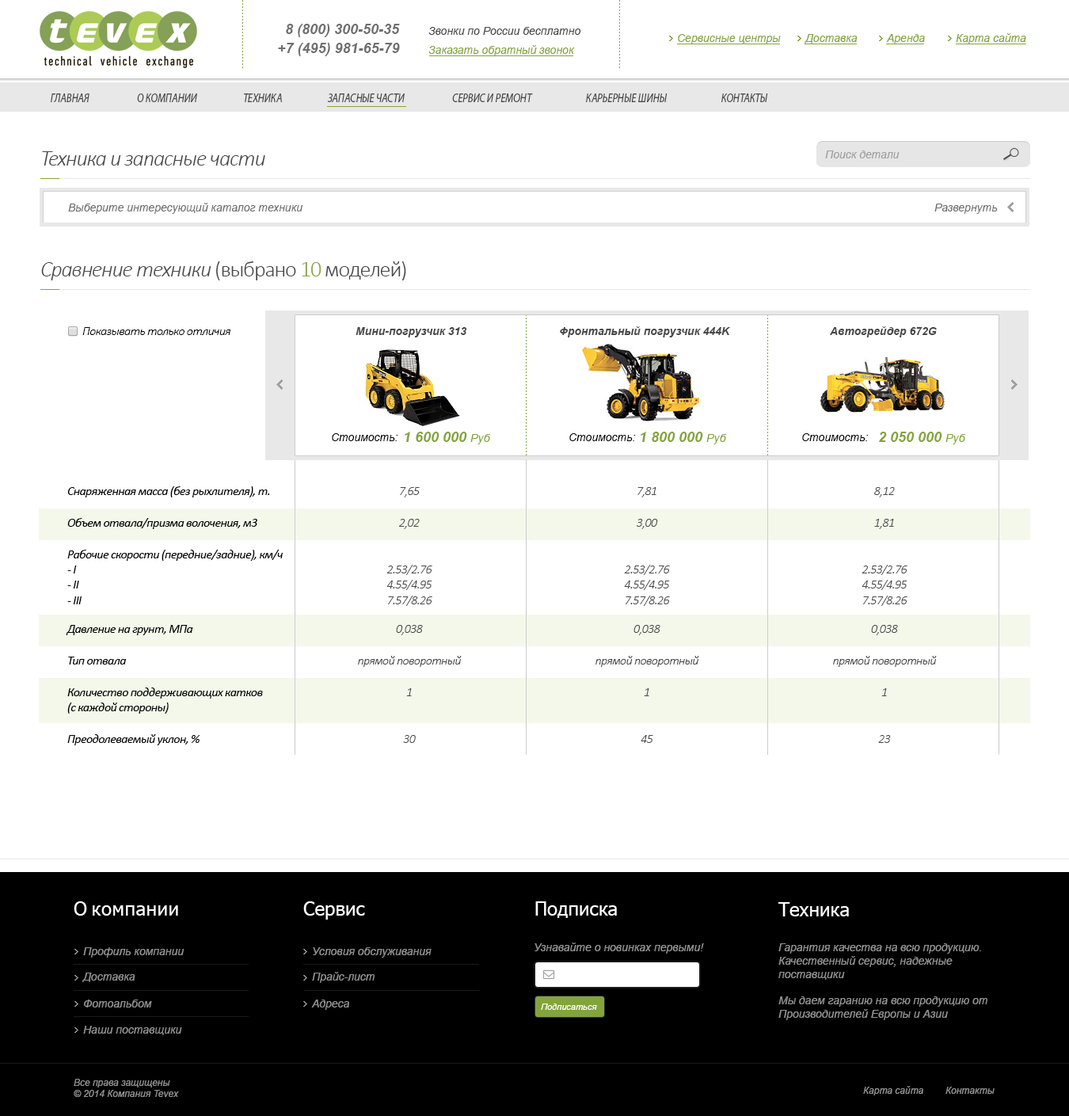
<style>
.page{position:relative;width:1069px;height:1116px;background:#ffffff}
.page>*{position:absolute;margin:0}
.t1{font:14.3px "Arial-BoldItalicMT";color:#6f6f6f}
.t2{font:11.1px "Arial-ItalicMT";color:#484848}
.t3{font:11.1px "Arial-ItalicMT";color:#83a43c}
.t4{font:12.9px "MyriadPro-It";color:#484848;scale:0.79 1}
.t5{font:22.2px "Calibri-LightItalic";letter-spacing:-0.04em;color:#484848}
.t6{font:11.1px "Arial-ItalicMT";color:#a0a0a0}
.t7{font:11.1px "Arial-ItalicMT";color:#6f6f6f}
.t8{font:22.2px "Calibri-Light";letter-spacing:-0.04em;color:#484848}
.t9{font:22.2px "Calibri-Light";letter-spacing:-0.04em;color:#83a43c}
.t10{font:12.7px "Calibri-LightItalic";letter-spacing:-0.04em;color:#000000}
.t11{font:12.7px "Calibri-Italic";letter-spacing:-0.04em;color:#000000}
.t12{font:12.7px "Calibri-LightItalic";letter-spacing:-0.04em;color:#484848}
.t13{font:19px "Tahoma";letter-spacing:0.02em;color:#ffffff}
.t14{font:19px "Tahoma";color:#ffffff}
.t15{font:11.1px "Arial-ItalicMT";color:#939393}
.t16{font:8.7px "Arial-ItalicMT";color:#ffffff}
.t17{font:9.5px "Arial-ItalicMT";color:#939393}
</style>
<div class="page">
<p class="t1" style="left:286px;top:24px;width:114px;height:13px">8 (800) 300-50-35</p>
<p class="t2" style="left:428px;top:27px;width:153px;height:8px">Звонки по России бесплатно</p>
<p class="t3" style="left:678px;top:34px;width:103px;height:10px">Сервисные центры</p>
<p class="t3" style="left:804px;top:34px;width:53px;height:10px">Доставка</p>
<p class="t3" style="left:886px;top:34px;width:39px;height:10px">Аренда</p>
<p class="t3" style="left:956px;top:33px;width:70px;height:11px">Карта сайта</p>
<p class="t1" style="left:278px;top:43px;width:122px;height:13px">+7 (495) 981-65-79</p>
<p class="t3" style="left:428px;top:45px;width:147px;height:11px">Заказать обратный звонок</p>
<p class="t4" style="left:51px;top:93px;width:38px;height:9px">ГЛАВНАЯ</p>
<p class="t4" style="left:137px;top:93px;width:60px;height:9px">О КОМПАНИИ</p>
<p class="t4" style="left:244px;top:93px;width:38px;height:9px">ТЕХНИКА</p>
<p class="t4" style="left:327px;top:93px;width:78px;height:9px">ЗАПАСНЫЕ ЧАСТИ</p>
<p class="t4" style="left:452px;top:93px;width:81px;height:9px">СЕРВИС И РЕМОНТ</p>
<p class="t4" style="left:586px;top:93px;width:81px;height:9px">КАРЬЕРНЫЕ ШИНЫ</p>
<p class="t4" style="left:721px;top:93px;width:47px;height:9px">КОНТАКТЫ</p>
<p class="t5" style="left:42px;top:151px;width:223px;height:14px">Техника и запасные части</p>
<p class="t6" style="left:825px;top:150px;width:74px;height:8px">Поиск детали</p>
<p class="t7" style="left:68px;top:203px;width:235px;height:11px">Выберите интересующий каталог техники</p>
<p class="t7" style="left:934px;top:203px;width:64px;height:11px">Развернуть</p>
<p class="t5" style="left:41px;top:261px;width:365px;height:19px">Сравнение техники <span class="t8">(выбрано </span><span class="t9">10 </span><span class="t8">моделей)</span></p>
<p class="t10" style="left:82px;top:327px;width:148px;height:8px">Показывать только отличия</p>
<p class="t11" style="left:67px;top:486px;width:203px;height:11px">Снаряженная масса (без рыхлителя), т.</p>
<p class="t12" style="left:400px;top:487px;width:20px;height:10px">7,65</p>
<p class="t12" style="left:637px;top:487px;width:19px;height:10px">7,81</p>
<p class="t12" style="left:874px;top:487px;width:21px;height:10px">8,12</p>
<p class="t11" style="left:67px;top:518px;width:190px;height:11px">Объем отвала/призма волочения, м3</p>
<p class="t12" style="left:399px;top:519px;width:21px;height:10px">2,02</p>
<p class="t12" style="left:637px;top:519px;width:21px;height:10px">3,00</p>
<p class="t12" style="left:874px;top:519px;width:20px;height:10px">1,81</p>
<p class="t11" style="left:67px;top:549px;width:216px;height:55px">Рабочие скорости (передние/задние), км/ч<br>- I<br>- II<br>- III</p>
<p class="t12" style="left:386px;top:565px;width:46px;height:41px;text-align:center">2.53/2.76<br>4.55/4.95<br>7.57/8.26</p>
<p class="t12" style="left:624px;top:565px;width:46px;height:41px;text-align:center">2.53/2.76<br>4.55/4.95<br>7.57/8.26</p>
<p class="t12" style="left:861px;top:565px;width:46px;height:41px;text-align:center">2.53/2.76<br>4.55/4.95<br>7.57/8.26</p>
<p class="t11" style="left:66px;top:625px;width:127px;height:10px">Давление на грунт, МПа</p>
<p class="t12" style="left:396px;top:625px;width:27px;height:10px">0,038</p>
<p class="t12" style="left:633px;top:625px;width:27px;height:10px">0,038</p>
<p class="t12" style="left:871px;top:625px;width:27px;height:10px">0,038</p>
<p class="t11" style="left:68px;top:656px;width:59px;height:8px">Тип отвала</p>
<p class="t12" style="left:358px;top:656px;width:104px;height:11px">прямой поворотный</p>
<p class="t12" style="left:595px;top:656px;width:104px;height:11px">прямой поворотный</p>
<p class="t12" style="left:833px;top:656px;width:104px;height:11px">прямой поворотный</p>
<p class="t11" style="left:67px;top:687px;width:196px;height:26px">Количество поддерживающих катков <br>(с каждой стороны)</p>
<p class="t12" style="left:406px;top:688px;width:6px;height:8px">1</p>
<p class="t12" style="left:644px;top:688px;width:5px;height:8px">1</p>
<p class="t12" style="left:881px;top:688px;width:6px;height:8px">1</p>
<p class="t11" style="left:67px;top:734px;width:133px;height:11px">Преодолеваемый уклон, %</p>
<p class="t12" style="left:403px;top:735px;width:13px;height:8px">30</p>
<p class="t12" style="left:641px;top:735px;width:12px;height:8px">45</p>
<p class="t12" style="left:878px;top:735px;width:13px;height:8px">23</p>
<p class="t13" style="left:74px;top:901px;width:104px;height:14px"><span class="t14">О </span>компании</p>
<p class="t14" style="left:303px;top:901px;width:62px;height:18px">Сервис</p>
<p class="t14" style="left:535px;top:901px;width:82px;height:17px">Подписка</p>
<p class="t14" style="left:778px;top:902px;width:71px;height:14px">Техника</p>
<p class="t15" style="left:83px;top:947px;width:101px;height:10px">Профиль компании</p>
<p class="t15" style="left:313px;top:947px;width:119px;height:10px">Условия обслуживания</p>
<p class="t15" style="left:534px;top:942px;width:170px;height:11px">Узнавайте о новинках первыми!</p>
<p class="t15" style="left:778px;top:943px;width:209px;height:77px">Гарантия качества на всю продукцию.<br>Качественный сервис, надежные <br>поставщики<br><br>Мы даем гаранию на всю продукцию от <br>Производителей Европы и Азии</p>
<p class="t15" style="left:82px;top:972px;width:53px;height:10px">Доставка</p>
<p class="t15" style="left:312px;top:971px;width:63px;height:12px">Прайс-лист</p>
<p class="t15" style="left:84px;top:999px;width:68px;height:8px">Фотоальбом</p>
<p class="t15" style="left:311px;top:999px;width:38px;height:10px">Адреса</p>
<p class="t16" style="left:541px;top:1003px;width:56px;height:6px">Подписаться</p>
<p class="t15" style="left:83px;top:1025px;width:99px;height:10px">Наши поставщики</p>
<p class="t17" style="left:74px;top:1078px;width:105px;height:19px">Все права защищены<br>© 2014 Компания Tevex</p>
<p class="t17" style="left:863px;top:1086px;width:60px;height:9px">Карта сайта</p>
<p class="t17" style="left:945px;top:1086px;width:49px;height:7px">Контакты</p>
</div>
